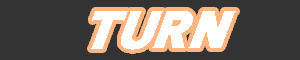
<style>
.page{position:relative;width:300px;height:60px;background:#333333}
.page>*{position:absolute;margin:0}
.t1{font:51.3px "DFGothic-SU-WINP-RKSJ-H";color:#ffffff}
</style>
<div class="page">
<p class="t1" style="left:91px;top:11px;width:145px;height:39px">TURN</p>
</div>
